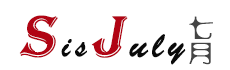
<style>
.page{position:relative;width:230px;height:70px;background:#ffffff}
.page>*{position:absolute;margin:0}
.t1{font:36px "BrushScriptStd";letter-spacing:0.11em;color:#0a0a0a;font-weight:bold}
.t2{font:60px "Algerian";letter-spacing:0.11em;color:#b10414;font-weight:bold;font-style:italic}
.t3{font:36px "BrushScriptMT";letter-spacing:0.11em;color:#0a0a0a;font-weight:bold}
.t4{font:24px/25px "FZXSHJW--GB1-0";letter-spacing:0.13em;color:#444444;font-weight:bold}
</style>
<div class="page">
<p class="t1" style="left:19px;top:15px;width:167px;height:50px"><span class="t2">S</span><span class="t3">is</span><span class="t2">J</span>uly</p>
<p class="t4" style="left:189px;top:16px;width:24px;height:49px">七<br>月</p>
</div>
